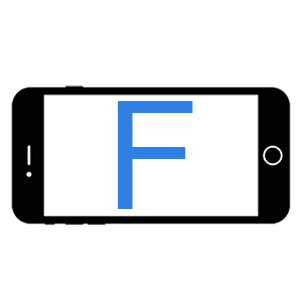
<style>
.page{position:relative;width:300px;height:300px;background:#ffffff}
.page>*{position:absolute;margin:0}
.t1{font:150px "Helvetica";color:#2f80e2}
</style>
<div class="page">
<p class="t1" style="left:117px;top:101px;width:76px;height:108px">F</p>
</div>
